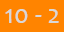
<style>
.page{position:relative;width:64px;height:32px;background:#ff8400}
.page>*{position:absolute;margin:0}
.t1{font:27px "Candara";color:#d8d8d8}
</style>
<div class="page">
<p class="t1" style="left:5px;top:9px;width:54px;height:14px">10 - 2</p>
</div>
